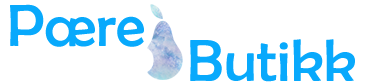
<style>
.page{position:relative;width:365px;height:84px;background:#ffffff}
.page>*{position:absolute;margin:0}
.t1{font:60px "BerlinSansFB-Reg";color:#09a9fc}
.t2{font:60px "BerlinSansFB-Reg";color:#08a9fc}
</style>
<div class="page">
<p class="t1" style="left:10px;top:4px;width:134px;height:43px">Pære</p>
<p class="t2" style="left:190px;top:39px;width:165px;height:43px">Butikk</p>
</div>
